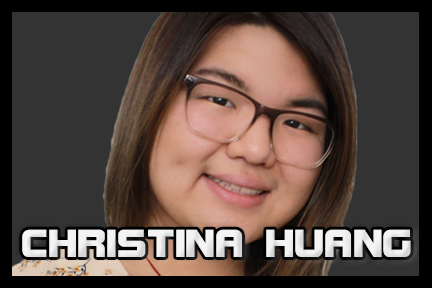
<style>
.page{position:relative;width:432px;height:288px;background:#333333}
.page>*{position:absolute;margin:0}
.t1{font:41.7px "BolsterBold";color:#f3f3f3}
</style>
<div class="page">
<p class="t1" style="left:22px;top:229px;width:389px;height:28px">CHRISTINA HUANG</p>
</div>
